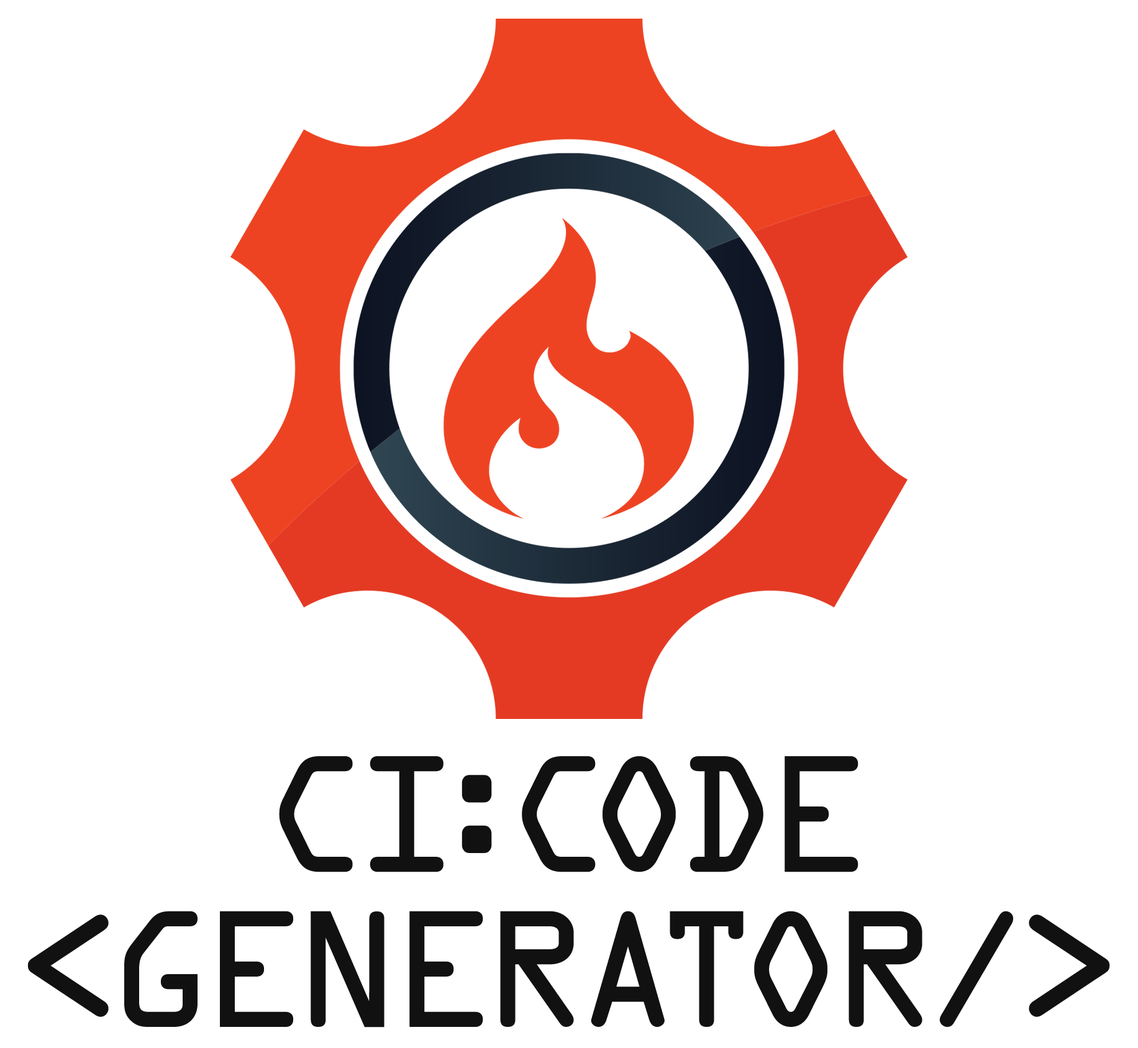
<style>
.page{position:relative;width:1138px;height:1048px;background:#ffffff}
.page>*{position:absolute;margin:0}
.t1{font:148.5px/155.1px "OCRAStd";letter-spacing:-0.075em;color:#111111}
</style>
<div class="page">
<p class="t1" style="left:28px;top:756px;width:1082px;height:272px;text-align:center">CI:CODE<br>&lt;GENERATOR/&gt;</p>
</div>
